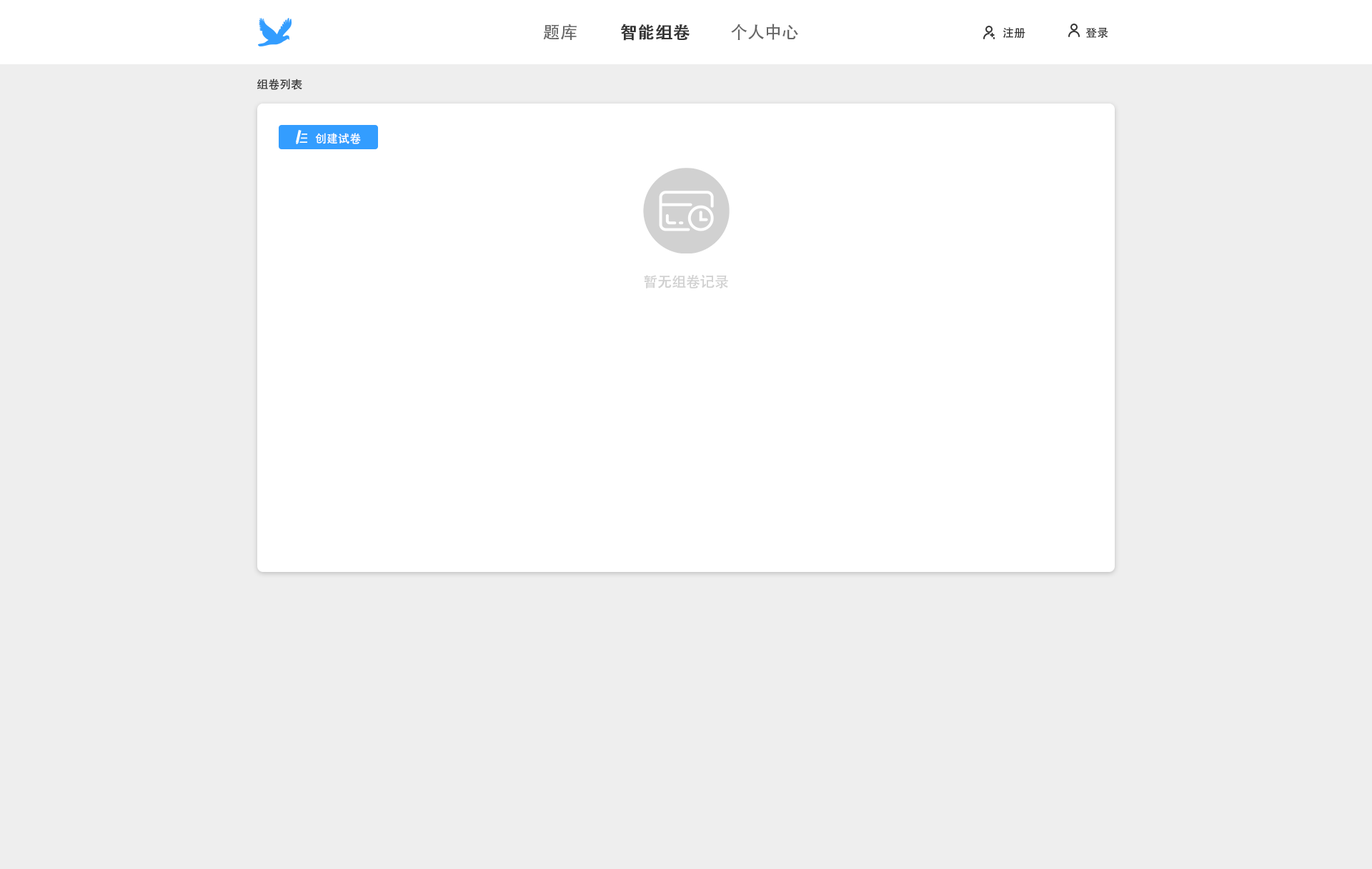
<style>
.page{position:relative;width:1372px;height:869px;background:#eeeeee}
.page>*{position:absolute;margin:0}
.t1{font:17.1px "AdobeHeitiStd-Regular";color:#666666}
.t2{font:17.1px "AdobeHeitiStd-Regular";color:#333333;font-weight:bold}
.t3{font:11.4px "AdobeHeitiStd-Regular";color:#333333}
.t4{font:11.4px "AdobeHeitiStd-Regular";color:#ffffff}
.t5{font:14.3px "AdobeHeitiStd-Regular";color:#d1d1d1}
</style>
<div class="page">
<p class="t1" style="left:543px;top:24px;width:33px;height:16px">题库</p>
<p class="t2" style="left:621px;top:24px;width:68px;height:17px">智能组卷</p>
<p class="t1" style="left:731px;top:24px;width:67px;height:16px">个人中心</p>
<p class="t3" style="left:1002px;top:27px;width:23px;height:12px">注册</p>
<p class="t3" style="left:1085px;top:27px;width:23px;height:12px">登录</p>
<p class="t3" style="left:257px;top:79px;width:45px;height:11px">组卷列表</p>
<p class="t4" style="left:315px;top:133px;width:46px;height:11px">创建试卷</p>
<p class="t5" style="left:644px;top:275px;width:84px;height:14px">暂无组卷记录</p>
</div>
